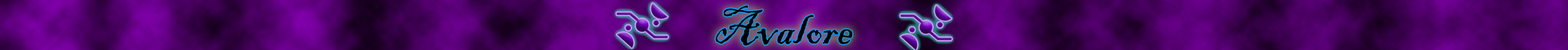
<style>
.page{position:relative;width:1568px;height:50px}
.page>*{position:absolute;margin:0}
.t1{font:50.4px "BlackadderITC-Regular";color:#000000}
</style>
<div class="page">
<p class="t1" style="left:715px;top:5px;width:138px;height:41px">Avalore</p>
</div>
